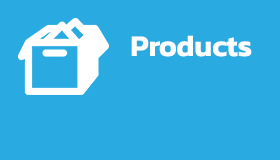
<style>
.page{position:relative;width:280px;height:160px;background:#29abe2}
.page>*{position:absolute;margin:0}
.t1{font:30px "Kanit-SemiBold";color:#ffffff}
</style>
<div class="page">
<p class="t1" style="left:131px;top:35px;width:121px;height:22px">Products</p>
</div>
